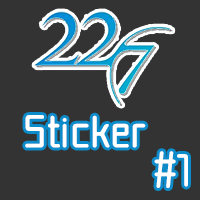
<style>
.page{position:relative;width:200px;height:200px;background:#333333}
.page>*{position:absolute;margin:0}
.t1{font:48px "Mamelon";color:#ffffff}
</style>
<div class="page">
<p class="t1" style="left:25px;top:115px;width:121px;height:33px">Sticker</p>
<p class="t1" style="left:154px;top:151px;width:34px;height:37px">#1</p>
</div>
